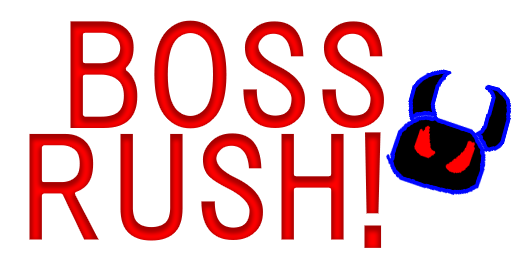
<style>
.page{position:relative;width:512px;height:256px;background:#ffffff}
.page>*{position:absolute;margin:0}
.t1{font:133.9px/56.3px "HGPGothicE";font-weight:bold}
</style>
<div class="page">
<p class="t1" style="left:27px;top:18px;width:359px;height:232px;text-align:right">BOSS<br><br>RUSH!</p>
</div>
